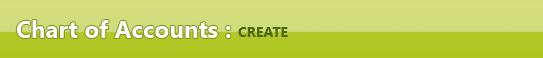
<style>
.page{position:relative;width:543px;height:58px}
.page>*{position:absolute;margin:0}
.t1{font:24px "SegoeUI-Bold";color:#fefefe}
.t2{font:14px "SegoeUI-Bold";color:#4a670c}
</style>
<div class="page">
<p class="t1" style="left:16px;top:20px;width:215px;height:18px">Chart of Accounts :</p>
<p class="t2" style="left:238px;top:27px;width:50px;height:10px">CREATE</p>
</div>
